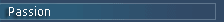
<style>
.page{position:relative;width:224px;height:22px;background:#314965}
.page>*{position:absolute;margin:0}
.t1{font:12.1px "Verdana";color:#ffffff;scale:0.91 1}
</style>
<div class="page">
<p class="t1" style="left:9px;top:6px;width:41px;height:10px">Passion</p>
</div>
